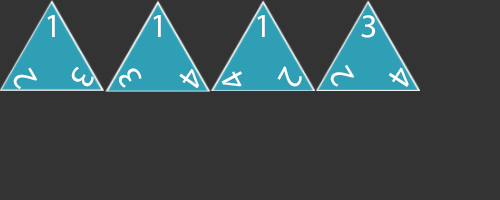
<style>
.page{position:relative;width:500px;height:200px;background:#333333}
.page>*{position:absolute;margin:0}
.t1{font:33.3px "MyriadPro-Regular";color:#ffffff}
.t2{font:33.3px "MyriadPro-Regular";color:#fefefe}
.t3{font:33.3px "MyriadPro-Regular";color:#fffefe}
</style>
<div class="page">
<p class="t1" style="left:47px;top:15px;width:8px;height:22px">1</p>
<p class="t2" style="left:153px;top:15px;width:8px;height:22px">1</p>
<p class="t1" style="left:257px;top:15px;width:8px;height:22px">1</p>
<p class="t3" style="left:361px;top:15px;width:15px;height:23px;rotate:2deg">3</p>
<p class="t2" style="left:330px;top:65px;width:25px;height:22px;rotate:-121deg">2</p>
<p class="t1" style="left:13px;top:67px;width:25px;height:22px;rotate:-120deg">2</p>
<p class="t1" style="left:71px;top:66px;width:23px;height:21px;rotate:120deg">3</p>
<p class="t1" style="left:119px;top:68px;width:23px;height:20px;rotate:-121deg">3</p>
<p class="t3" style="left:179px;top:68px;width:20px;height:21px;rotate:125deg">4</p>
<p class="t2" style="left:221px;top:71px;width:21px;height:16px;rotate:-118deg">4</p>
<p class="t2" style="left:277px;top:66px;width:25px;height:21px;rotate:119deg">2</p>
<p class="t1" style="left:388px;top:67px;width:21px;height:20px;rotate:123deg">4</p>
</div>
